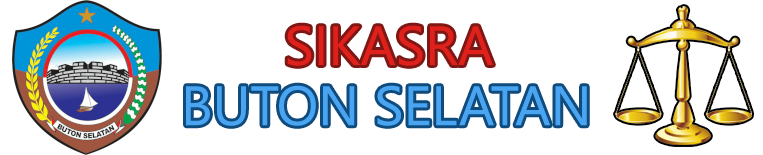
<style>
.page{position:relative;width:763px;height:155px;background:#ffffff}
.page>*{position:absolute;margin:0}
.t1{font:55px "NirmalaUI";color:#e0201b}
.t2{font:55px "NirmalaUI";color:#49a5f2}
.t3{font:55px "NirmalaUI";color:#f2e849}
</style>
<div class="page">
<p class="t1" style="left:287px;top:25px;width:206px;height:41px">SIKASRA</p>
<p class="t2" style="left:186px;top:85px;width:401px;height:41px"><span class="t3"><br></span>BUTON SELATAN</p>
</div>
